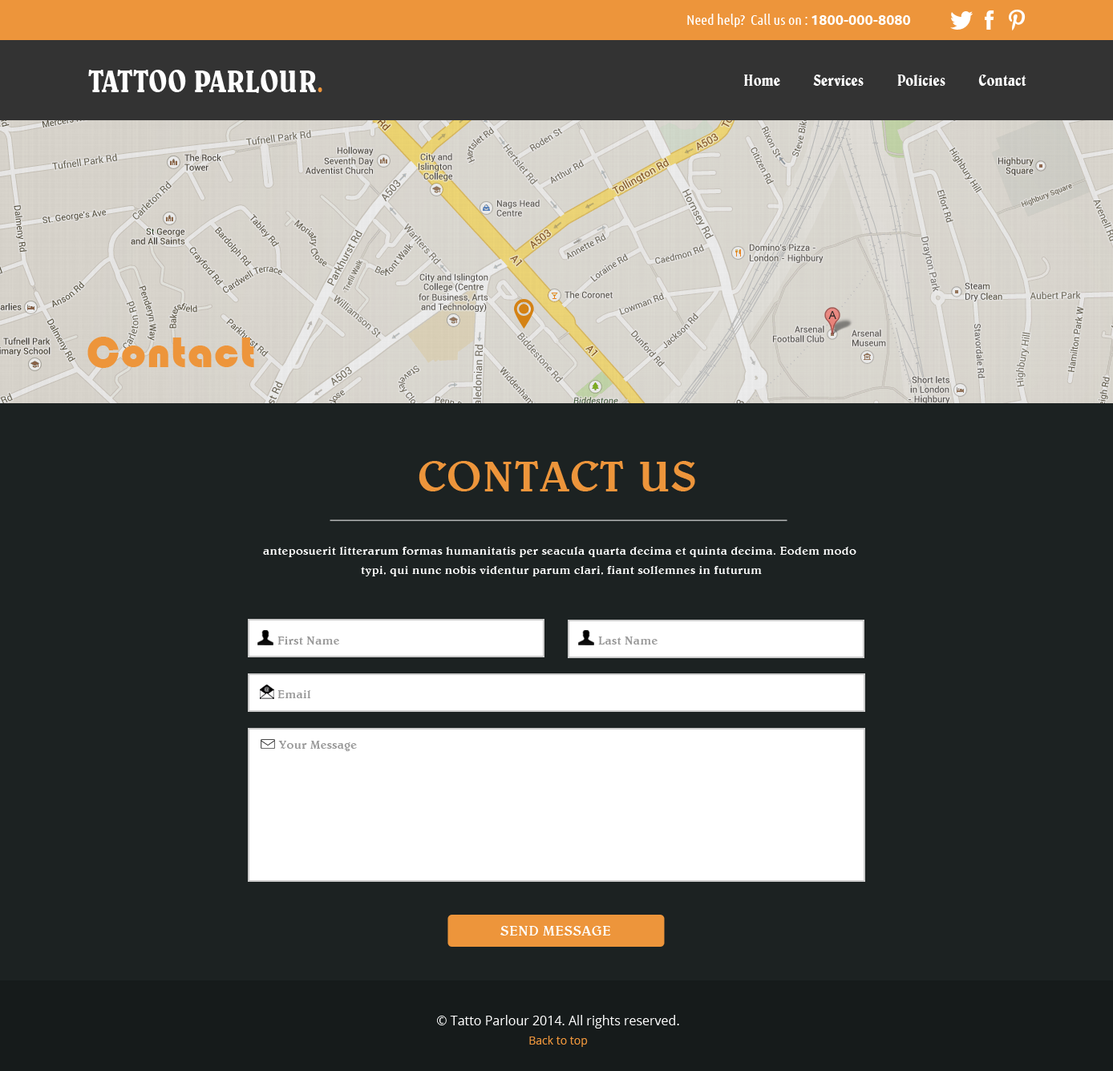
<style>
.page{position:relative;width:1113px;height:1071px;background:#1c2222}
.page>*{position:absolute;margin:0}
.t1{font:14.4px "UbuntuCondensed-Regular";color:#ffffff}
.t2{font:14.4px "Ubuntu-Bold";color:#ffffff}
.t3{font:32.1px "BelweBT-RomanCondensed";color:#ffffff}
.t4{font:32.1px "BelweBT-RomanCondensed";color:#ed953b}
.t5{font:16px "BelweBT-RomanCondensed";color:#ffffff}
.t6{font:44.1px "Bauhaus93";letter-spacing:0.025em;color:#ed953b}
.t7{font:44.1px "BelweBT-Medium";letter-spacing:0.025em;color:#ed953b}
.t8{font:12px/19.2px "BelweBT-Medium";letter-spacing:0.025em;color:#fffffe}
.t9{font:12px "BelweBT-Medium";letter-spacing:0.025em;color:#999999}
.t10{font:12px "OpenSans";letter-spacing:0.025em}
.t11{font:14.4px "BelweBT-Medium";letter-spacing:0.025em;color:#fefefc}
.t12{font:12.8px/19.2px "OpenSans";color:#ffffff}
.t13{font:11.2px/19.2px "OpenSans";color:#ed953b}
</style>
<div class="page">
<p class="t1" style="left:687px;top:14px;width:224px;height:13px">Need help?  Call us on : <span class="t2">1800-000-8080</span></p>
<p class="t3" style="left:88px;top:70px;width:234px;height:23px">TATTOO PARLOUR<span class="t4">.</span></p>
<p class="t5" style="left:744px;top:75px;width:282px;height:11px">Home          Services          Policies          Contact</p>
<p class="t6" style="left:87px;top:337px;width:167px;height:31px">Contact</p>
<p class="t7" style="left:419px;top:461px;width:276px;height:31px">CONTACT US</p>
<p class="t8" style="left:263px;top:547px;width:593px;height:30px;text-align:center">anteposuerit litterarum formas humanitatis per seacula quarta decima et quinta decima. Eodem modo <br>typi, qui nunc nobis videntur parum clari, fiant sollemnes in futurum</p>
<p class="t9" style="left:277px;top:637px;width:62px;height:8px">First Name</p>
<p class="t9" style="left:598px;top:637px;width:60px;height:8px">Last Name</p>
<p class="t9" style="left:277px;top:690px;width:33px;height:8px">Email</p>
<p class="t10" style="left:278px;top:741px;width:83px;height:11px">Your Message</p>
<p class="t9" style="left:278px;top:741px;width:79px;height:10px">Your Message</p>
<p class="t11" style="left:500px;top:926px;width:111px;height:10px">SEND MESSAGE</p>
<p class="t12" style="left:437px;top:1015px;width:242px;height:32px;text-align:center">© Tatto Parlour 2014. All rights reserved.<br><span class="t13">Back to top</span></p>
</div>
